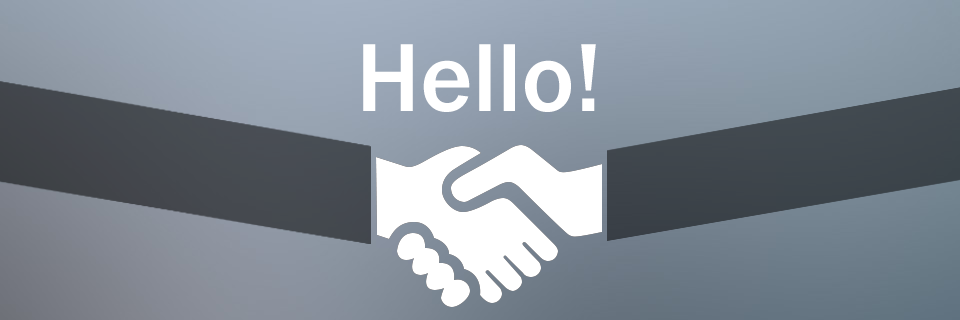
<style>
.page{position:relative;width:960px;height:320px}
.page>*{position:absolute;margin:0}
.t1{font:100px "FranklinGothic-Medium";color:#ffffff}
</style>
<div class="page">
<p class="t1" style="left:363px;top:44px;width:233px;height:68px">Hello!</p>
</div>
